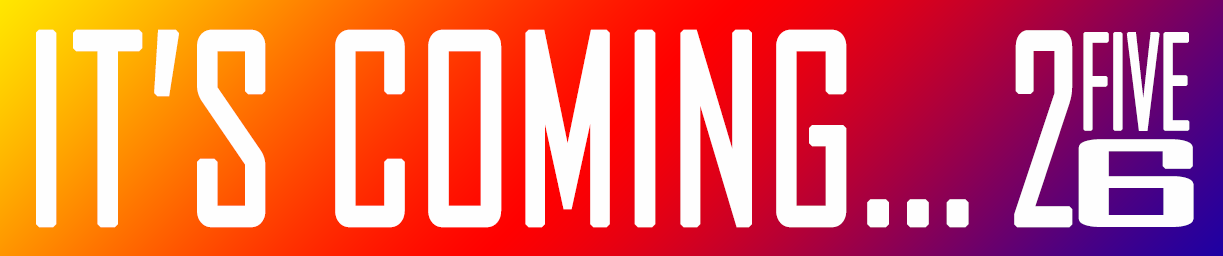
<style>
.page{position:relative;width:1223px;height:256px;background:#fefefe}
.page>*{position:absolute;margin:0}
.t1{font:250px "AgencyFB-Reg";color:#fefefe;font-weight:bold;scale:0.82 1}
.t2{font:250px "AgencyFB-Reg";color:#fefefe;font-weight:bold;scale:0.69 1}
.t3{font:125px "AgencyFB-Reg";letter-spacing:-0.04em;color:#fefefe;font-weight:bold;scale:0.72 1}
.t4{font:107.5px "AgencyFB-Reg";color:#fefefe;font-weight:bold;scale:3.35 1}
</style>
<div class="page">
<p class="t1" style="left:36px;top:29px;width:933px;height:199px">IT’S COMING...</p>
<p class="t2" style="left:1014px;top:30px;width:59px;height:198px">2</p>
<p class="t3" style="left:1083px;top:32px;width:107px;height:99px">FIVE</p>
<p class="t4" style="left:1078px;top:139px;width:116px;height:88px">6</p>
</div>
